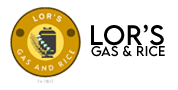
<style>
.page{position:relative;width:178px;height:90px;background:#ffffff}
.page>*{position:absolute;margin:0}
.t1{font:25px "LEMONMILK-Regular";letter-spacing:0.02em;color:#000000}
.t2{font:12.5px "LEMONMILK-Regular";letter-spacing:0.02em;color:#000000}
</style>
<div class="page">
<p class="t1" style="left:91px;top:24px;width:73px;height:22px">LOR’S</p>
<p class="t2" style="left:91px;top:45px;width:74px;height:12px">gAS &amp; rICE</p>
</div>
